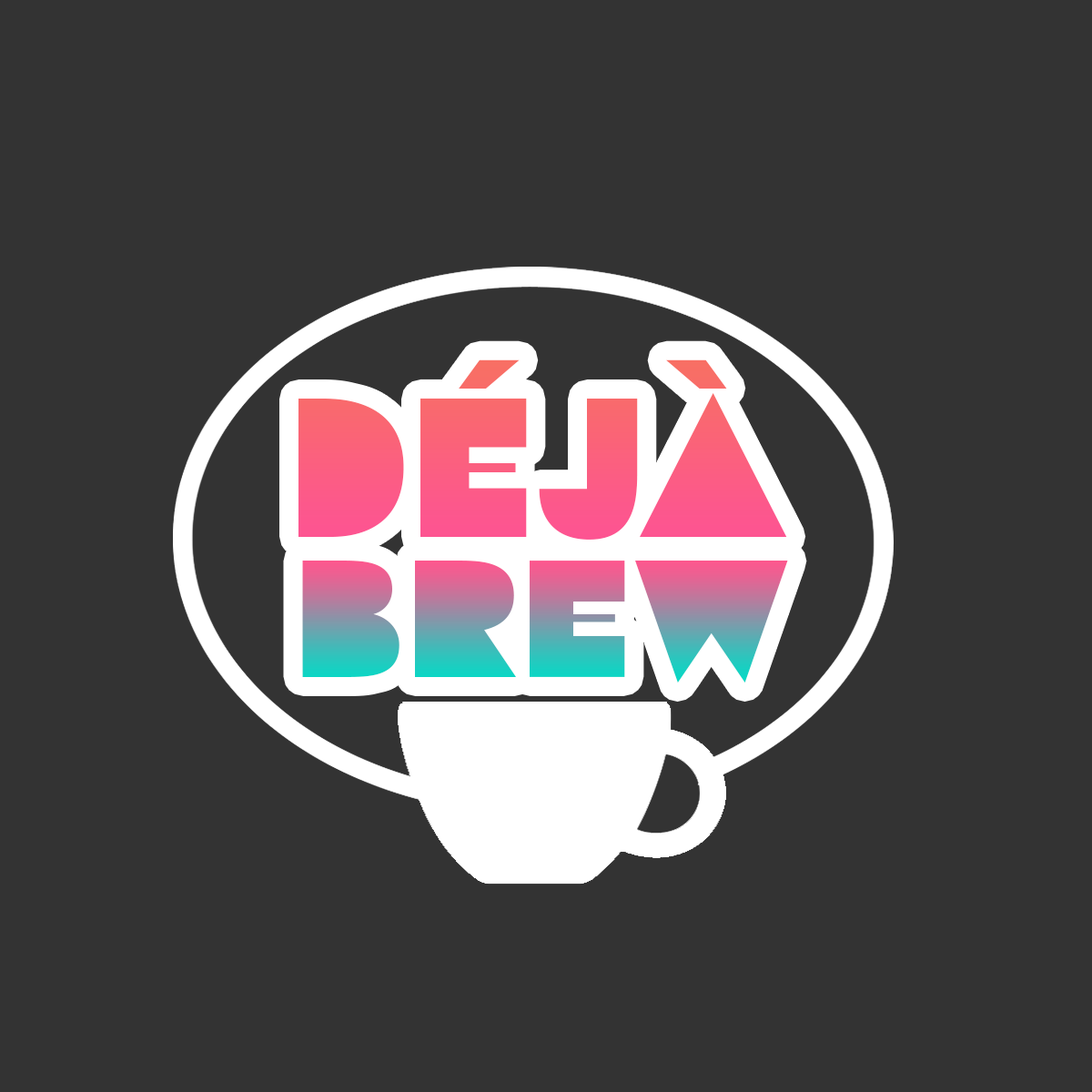
<style>
.page{position:relative;width:1092px;height:1092px;background:#333333}
.page>*{position:absolute;margin:0}
.t1{font:197.8px "Flegrei-Regular";color:#fb5d83}
.t2{font:166.9px "Flegrei-Regular";scale:1.06 1}
</style>
<div class="page">
<p class="t1" style="left:298px;top:359px;width:489px;height:181px">Déjà</p>
<p class="t2" style="left:302px;top:561px;width:486px;height:122px">BREW</p>
</div>
